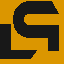
<style>
.page{position:relative;width:64px;height:64px;background:#db9600}
.page>*{position:absolute;margin:0}
.t1{font:69.2px "Ethnocentric";color:#181818;scale:0.7 1}
.t2{font:48px "Ethnocentric";color:#181818}
</style>
<div class="page">
<p class="t1" style="left:13px;top:1px;width:46px;height:50px;rotate:180deg">P</p>
<p class="t2" style="left:0px;top:24px;width:37px;height:35px">L</p>
</div>
